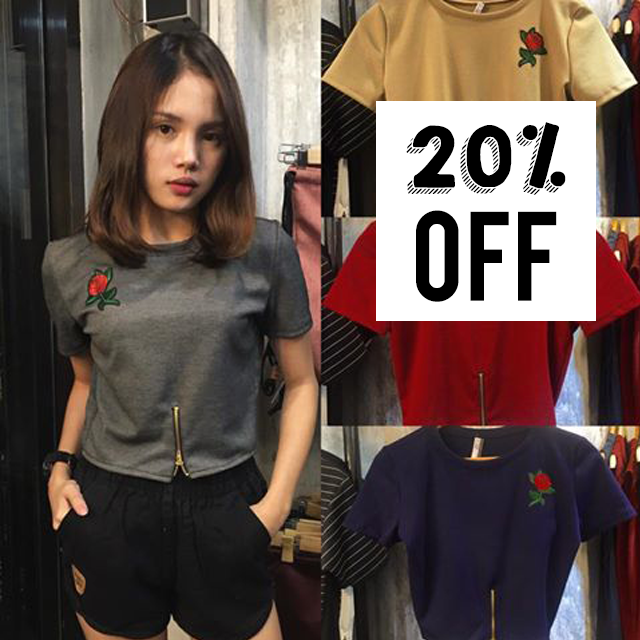
<style>
.page{position:relative;width:640px;height:640px}
.page>*{position:absolute;margin:0}
.t1{font:75px "KGHAPPY";color:#000000}
.t2{font:100px "Bebas";color:#000000}
</style>
<div class="page">
<p class="t1" style="left:406px;top:122px;width:160px;height:73px">20%</p>
<p class="t2" style="left:416px;top:210px;width:141px;height:92px">off</p>
</div>
